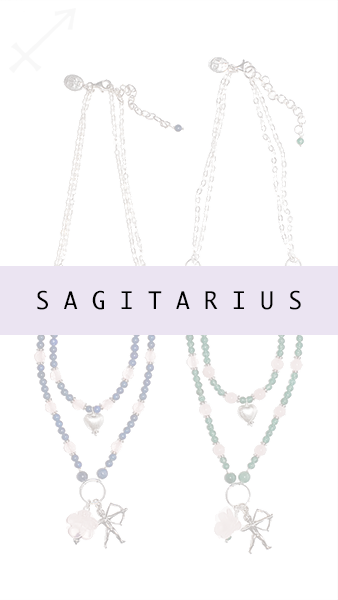
<style>
.page{position:relative;width:338px;height:600px;background:#ffffff}
.page>*{position:absolute;margin:0}
.t1{font:23.5px "Ayuthaya";color:#000000}
</style>
<div class="page">
<p class="t1" style="left:37px;top:290px;width:264px;height:20px">S A G I T A R I U S</p>
</div>
